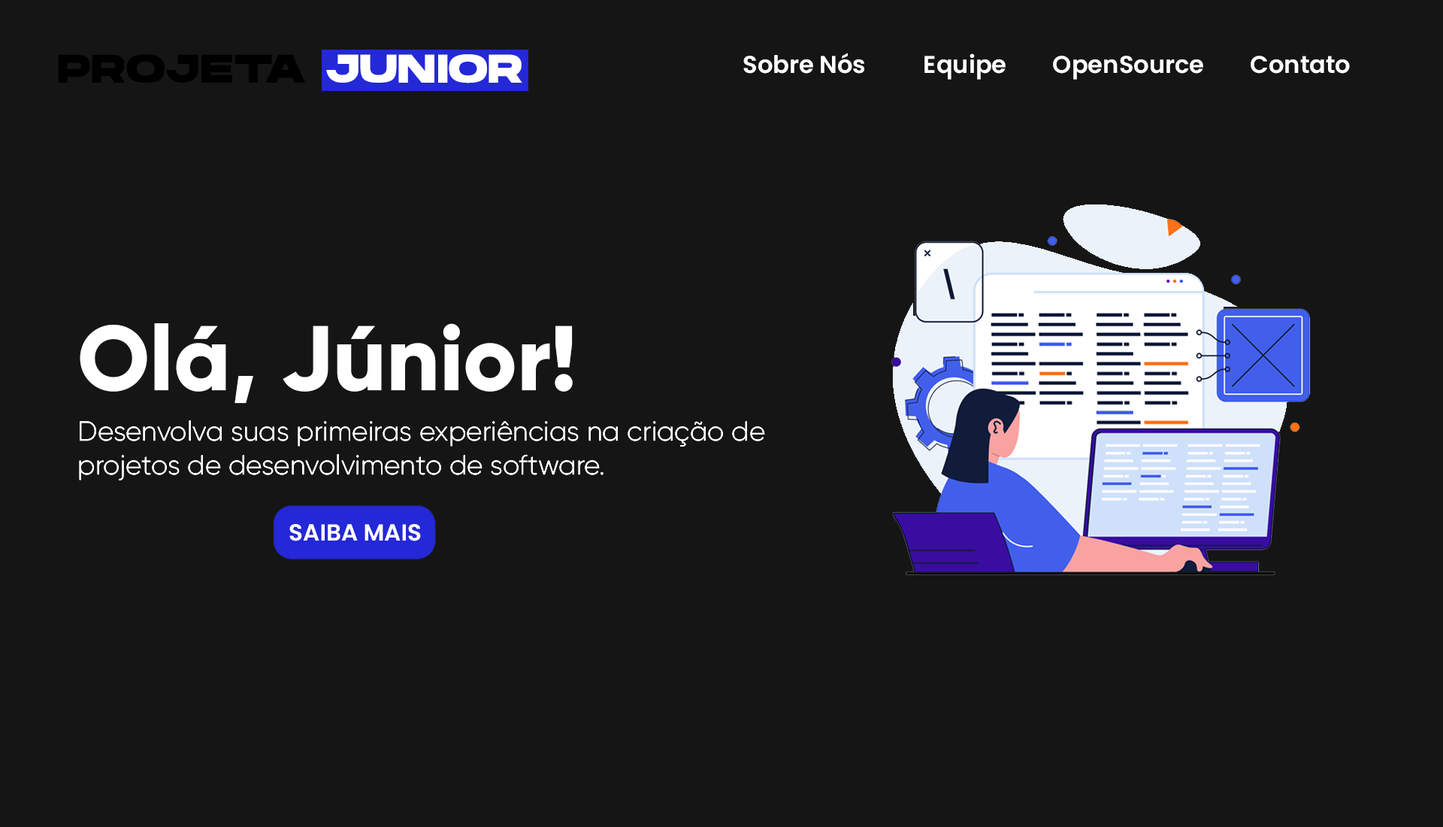
<style>
.page{position:relative;width:1443px;height:827px;background:#151515}
.page>*{position:absolute;margin:0}
.t1{font:24.2px "Poppins-SemiBold";color:#ffffff}
.t2{font:39.9px "HansonBold";color:#000000}
.t3{font:39.9px "HansonBold";color:#ffffff}
.t4{font:91.6px "Gilroy-ExtraBold";color:#ffffff}
.t5{font:23.3px "Poppins-SemiBold";color:#ffffff}
</style>
<div class="page">
<p class="t1" style="left:743px;top:53px;width:607px;height:27px">Sobre Nós          Equipe        OpenSource        Contato</p>
<p class="t2" style="left:58px;top:54px;width:464px;height:29px">PROJETA <span class="t3">JUNIOR</span></p>
<p class="t4" style="left:80px;top:323px;width:493px;height:81px">Olá, Júnior!</p>
<p class="t5" style="left:289px;top:524px;width:132px;height:17px">SAIBA MAIS</p>
</div>
